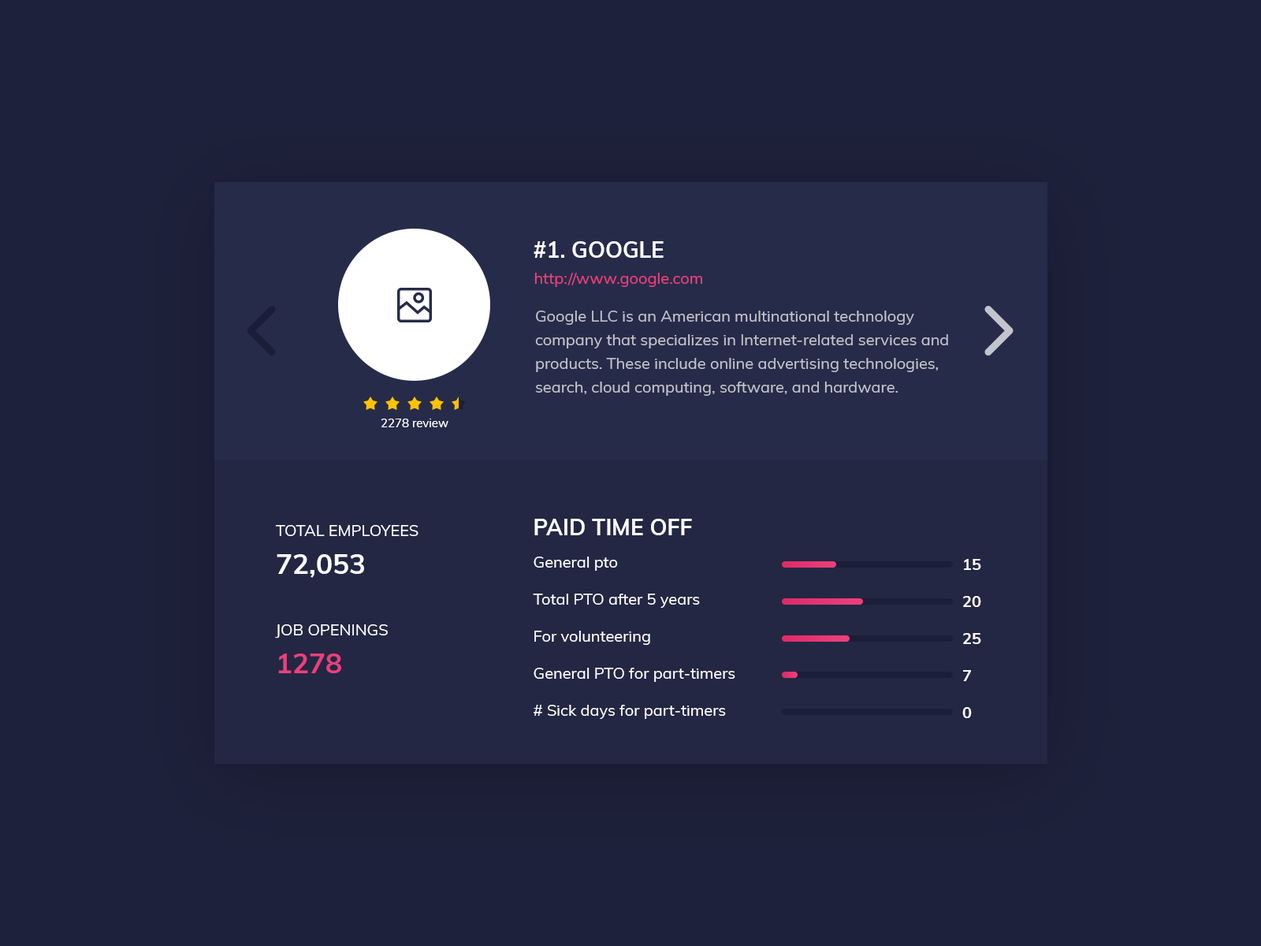
<style>
.page{position:relative;width:1261px;height:946px;background:#1e213b}
.page>*{position:absolute;margin:0}
.t1{font:22.1px "Muli-Bold";color:#ffffff;text-transform:uppercase}
.t2{font:15.8px "Muli-Regular";color:#ec407a}
.t3{font:15.8px/23.6px "Muli-Regular";color:#c3c3c9}
.t4{font:11.8px "Muli-Regular";color:#ffffff}
.t5{font:15.8px "Muli-Regular";color:#ffffff;text-transform:uppercase}
.t6{font:27.6px "Muli-Bold";color:#ffffff;text-transform:uppercase}
.t7{font:15.8px/37px "Muli-Regular";color:#ffffff}
.t8{font:15.8px/37px "Muli-Bold";color:#ffffff}
.t9{font:27.6px "Muli-Bold";color:#ec407a;text-transform:uppercase}
</style>
<div class="page">
<p class="t1" style="left:534px;top:241px;width:130px;height:17px">#1. Google</p>
<p class="t2" style="left:534px;top:273px;width:168px;height:14px">http://www.google.com</p>
<p class="t3" style="left:535px;top:311px;width:413px;height:85px">Google LLC is an American multinational technology company that specializes in Internet-related services and products. These include online advertising technologies, search, cloud computing, software, and hardware.</p>
<p class="t4" style="left:381px;top:418px;width:67px;height:9px">2278 review</p>
<p class="t1" style="left:534px;top:519px;width:158px;height:16px">Paid time off</p>
<p class="t5" style="left:275px;top:525px;width:143px;height:11px">Total employees</p>
<p class="t6" style="left:277px;top:554px;width:87px;height:24px">72,053</p>
<p class="t7" style="left:533px;top:556px;width:202px;height:163px">General pto<br>Total PTO after 5 years<br>For volunteering<br>General PTO for part-timers<br># Sick days for part-timers</p>
<p class="t8" style="left:962px;top:559px;width:19px;height:159px">15<br>20<br>25<br>7<br>0</p>
<p class="t5" style="left:275px;top:624px;width:113px;height:14px">Job openings</p>
<p class="t9" style="left:278px;top:653px;width:63px;height:20px">1278</p>
</div>
